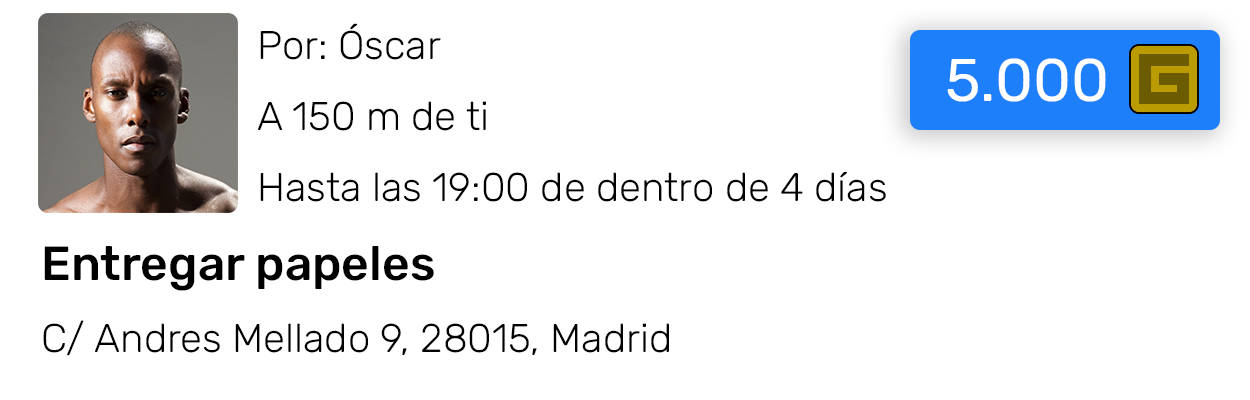
<style>
.page{position:relative;width:1250px;height:400px;background:#ffffff}
.page>*{position:absolute;margin:0}
.t1{font:40px "Rubik-Light";color:#000000}
.t2{font:10px "Roboto-Regular";color:#000000}
.t3{font:48px "Rubik-Medium";color:#000000}
.t4{font:60px "Rubik-Regular";color:#ffffff}
</style>
<div class="page">
<p class="t1" style="left:43px;top:23px;width:843px;height:333px"><span class="t2">      </span>Por: Óscar<br><br><br>      A 150 m de ti<br><br><br>      Hasta las 19:00 de dentro de 4 días<br><br><br><span class="t3">Entregar papeles<br><br></span>C/ Andres Mellado 9, 28015, Madrid</p>
<p class="t4" style="left:947px;top:58px;width:159px;height:44px">5.000</p>
</div>
